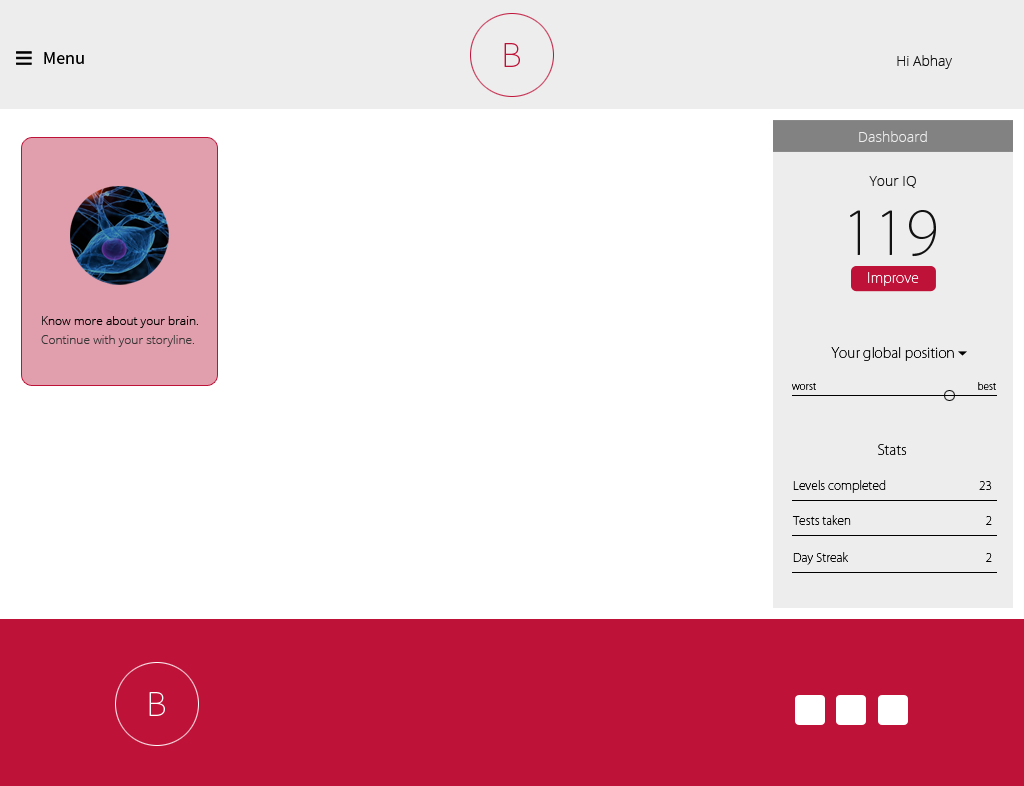
<style>
.page{position:relative;width:1024px;height:786px;background:#ffffff}
.page>*{position:absolute;margin:0}
.t1{font:18px "SourceSansPro-Regular";color:#000000}
.t2{font:36px "SourceSansPro-ExtraLight";color:#bf1238}
.t3{font:14px "OpenSans-Light";color:#121212}
.t4{font:14px "OpenSans-Light";color:#ededed}
.t5{font:60px "KozGoPr6N-ExtraLight";color:#121212}
.t6{font:14px "KozGoPr6N-ExtraLight";color:#ffffff}
.t7{font:12px "OpenSans-Light";color:#010101}
.t8{font:12px "OpenSans-Light";color:#3a3737}
.t9{font:14px "KozGoPr6N-ExtraLight";color:#000000}
.t10{font:10px "KozGoPr6N-ExtraLight";color:#000000}
.t11{font:12px "KozGoPr6N-ExtraLight";color:#000000}
.t12{font:36px "SourceSansPro-ExtraLight";color:#ffffff}
</style>
<div class="page">
<p class="t1" style="left:44px;top:52px;width:40px;height:12px">Menu</p>
<p class="t2" style="left:504px;top:43px;width:16px;height:24px">B</p>
<p class="t3" style="left:897px;top:55px;width:55px;height:14px">Hi Abhay</p>
<p class="t4" style="left:859px;top:131px;width:68px;height:11px">Dashboard</p>
<p class="t3" style="left:869px;top:176px;width:47px;height:12px">Your IQ</p>
<p class="t5" style="left:850px;top:210px;width:86px;height:47px">119</p>
<p class="t6" style="left:868px;top:272px;width:51px;height:14px">Improve</p>
<p class="t7" style="left:42px;top:316px;width:156px;height:12px">Know more about your brain.</p>
<p class="t8" style="left:41px;top:335px;width:153px;height:12px">Continue with your storyline.</p>
<p class="t9" style="left:831px;top:347px;width:123px;height:14px">Your global position</p>
<p class="t10" style="left:792px;top:383px;width:24px;height:7px">worst</p>
<p class="t10" style="left:978px;top:382px;width:18px;height:8px">best</p>
<p class="t9" style="left:878px;top:444px;width:29px;height:11px">Stats</p>
<p class="t11" style="left:793px;top:480px;width:93px;height:13px">Levels completed</p>
<p class="t11" style="left:979px;top:481px;width:13px;height:9px">23</p>
<p class="t11" style="left:792px;top:515px;width:59px;height:10px">Tests taken</p>
<p class="t11" style="left:986px;top:516px;width:6px;height:9px">2</p>
<p class="t11" style="left:793px;top:552px;width:55px;height:13px">Day Streak</p>
<p class="t11" style="left:986px;top:553px;width:6px;height:9px">2</p>
<p class="t12" style="left:149px;top:692px;width:16px;height:24px">B</p>
</div>
